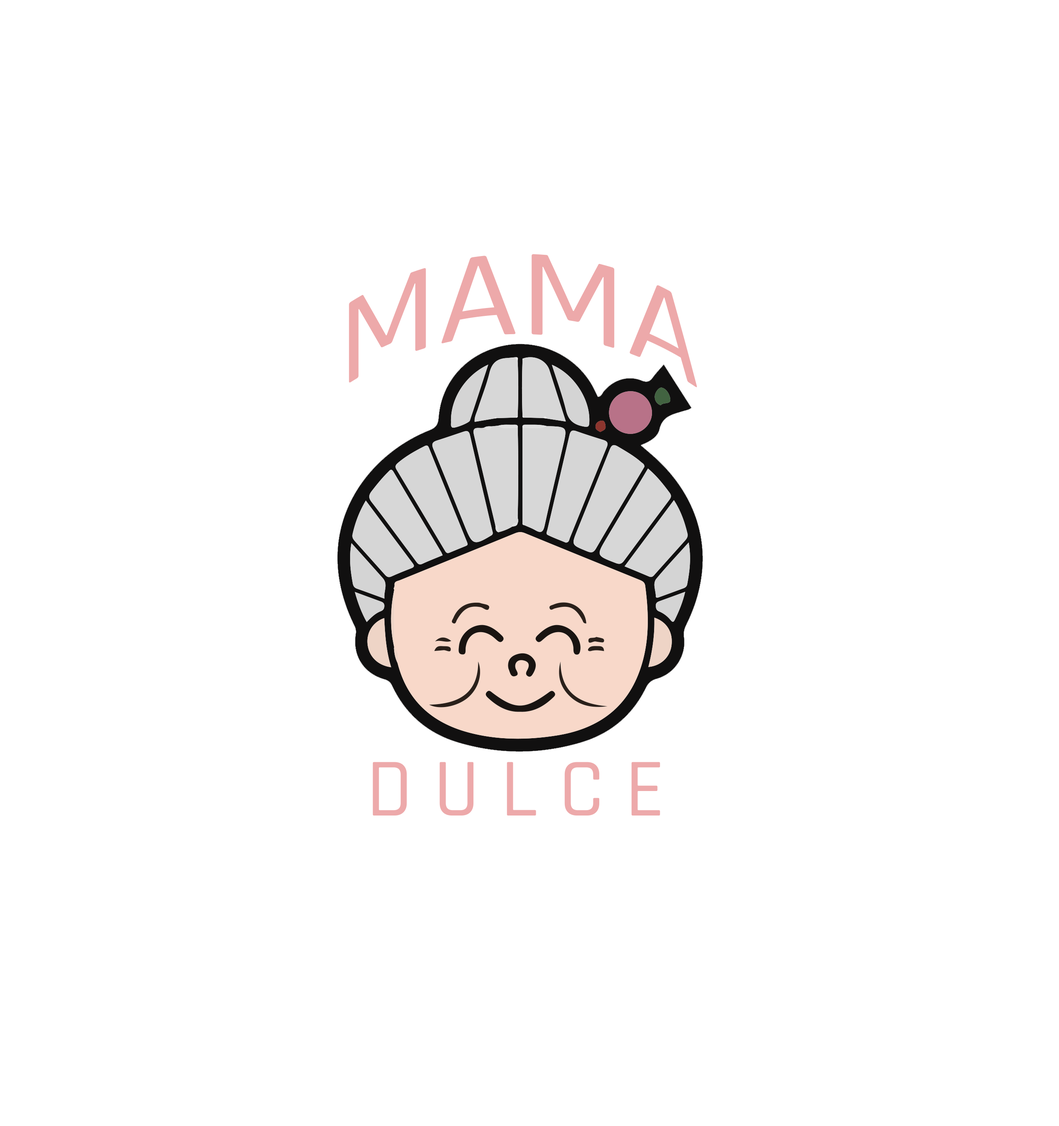
<style>
.page{position:relative;width:1059px;height:1126px;background:#ffffff}
.page>*{position:absolute;margin:0}
.t1{font:124.6px "Rajdhani-Medium";color:#eda9aa}
.t2{font:83.1px "Rajdhani-Medium";color:#eda9aa}
</style>
<div class="page">
<p class="t1" style="left:349px;top:254px;width:349px;height:133px">MAMA</p>
<p class="t2" style="left:373px;top:762px;width:288px;height:53px">D U L C E</p>
</div>
